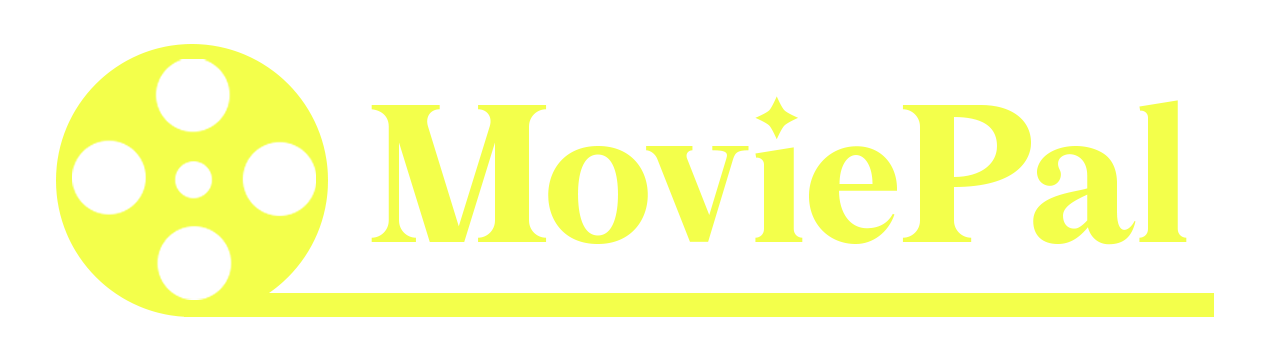
<style>
.page{position:relative;width:1271px;height:360px;background:#ffffff}
.page>*{position:absolute;margin:0}
.t1{font:170.8px "BohemianSoul-Regular";letter-spacing:0.005em;color:#f3ff4b}
</style>
<div class="page">
<p class="t1" style="left:371px;top:96px;width:816px;height:149px">MoviePal</p>
</div>
